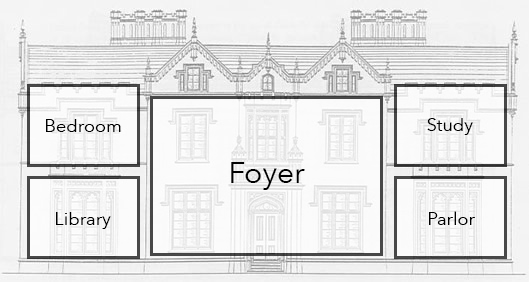
<style>
.page{position:relative;width:529px;height:282px}
.page>*{position:absolute;margin:0}
.t1{font:18px "AvenirNext-Regular";color:#000000}
.t2{font:30px "AvenirNext-Regular";color:#000000}
</style>
<div class="page">
<p class="t1" style="left:46px;top:119px;width:75px;height:13px">Bedroom</p>
<p class="t1" style="left:427px;top:118px;width:46px;height:17px">Study</p>
<p class="t2" style="left:231px;top:162px;width:74px;height:28px">Foyer</p>
<p class="t1" style="left:56px;top:212px;width:55px;height:17px">Library</p>
<p class="t1" style="left:429px;top:211px;width:46px;height:14px">Parlor</p>
</div>
